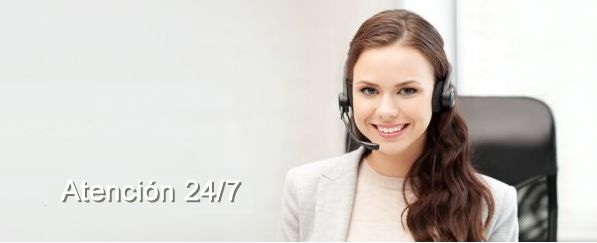
<style>
.page{position:relative;width:597px;height:243px}
.page>*{position:absolute;margin:0}
.t1{font:28px "ArialMT";color:#ffffff;font-weight:bold}
.t2{font:28px "ArialMT";font-weight:bold}
</style>
<div class="page">
<p class="t1" style="left:60px;top:179px;width:180px;height:22px">Atención 24/7</p>
<p class="t2" style="left:62px;top:181px;width:180px;height:22px">Atención 24/7</p>
</div>
